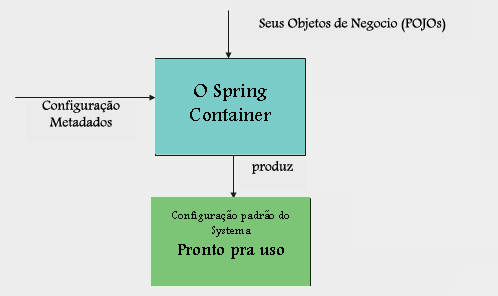
<style>
.page{position:relative;width:498px;height:296px;background:#ededed}
.page>*{position:absolute;margin:0}
.t1{font:14px "Andalus";color:#000000}
.t2{font:20px "Andalus";color:#000000}
.t3{font:12px "Andalus";color:#000000}
.t4{font:18px "Andalus";color:#000000}
</style>
<div class="page">
<p class="t1" style="left:259px;top:17px;width:187px;height:16px">Seus Objetos de Negocio (POJOs)</p>
<p class="t2" style="left:190px;top:84px;width:81px;height:37px;text-align:center">O Spring        Container</p>
<p class="t1" style="left:42px;top:100px;width:78px;height:27px;text-align:center">Configuração<br>Metadados</p>
<p class="t1" style="left:252px;top:161px;width:41px;height:13px">produz</p>
<p class="t3" style="left:172px;top:210px;width:117px;height:49px;text-align:center">Configuração padrão do Systema<br><span class="t4">Pronto pra uso</span></p>
</div>
